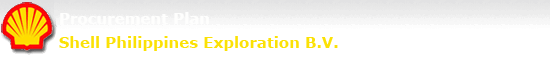
<style>
.page{position:relative;width:550px;height:58px;background:#ffffff}
.page>*{position:absolute;margin:0}
.t1{font:15px "Verdana-Bold";color:#fefefd}
.t2{font:15px "Verdana-Bold";color:#fbe105}
</style>
<div class="page">
<p class="t1" style="left:60px;top:12px;width:149px;height:12px">Procurement Plan</p>
<p class="t2" style="left:59px;top:36px;width:279px;height:15px">Shell Philippines Exploration B.V.</p>
</div>
